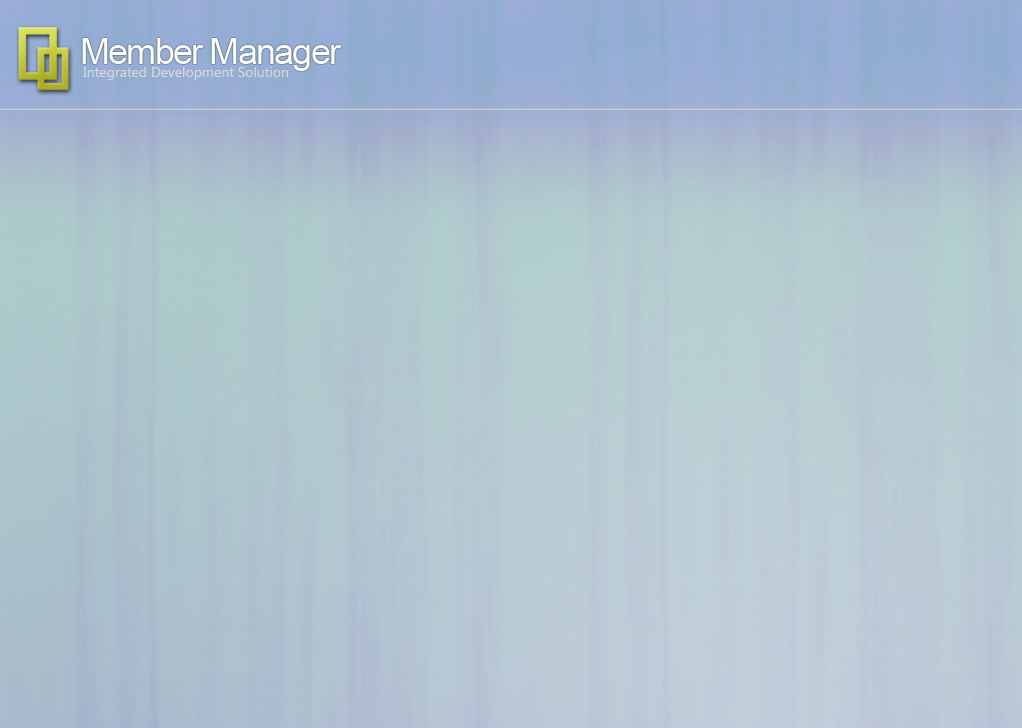
<style>
.page{position:relative;width:1022px;height:728px}
.page>*{position:absolute;margin:0}
.t1{font:36px "ArialMT";letter-spacing:-0.05em;color:#fdfeff}
.t2{font:14px "SegoeUI";color:#d6d7d9}
</style>
<div class="page">
<p class="t1" style="left:82px;top:38px;width:260px;height:33px">Member Manager</p>
<p class="t2" style="left:83px;top:67px;width:205px;height:13px">Integrated Development Solution</p>
</div>
